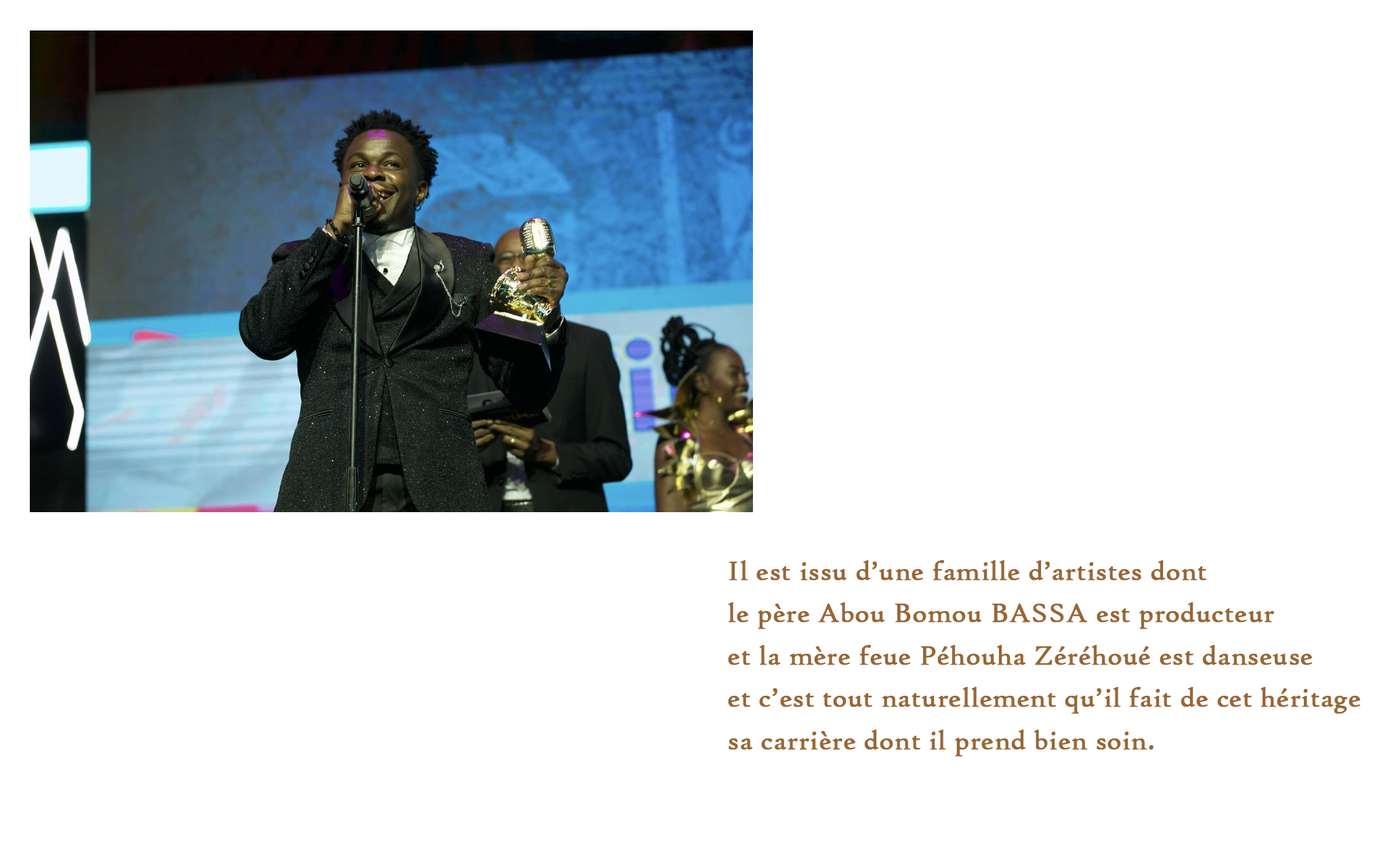
<style>
.page{position:relative;width:1388px;height:859px;background:#ffffff}
.page>*{position:absolute;margin:0}
.t1{font:28.2px/42.4px "HighTowerText-Reg";color:#996633;font-weight:bold}
</style>
<div class="page">
<p class="t1" style="left:728px;top:560px;width:632px;height:197px">Il est issu d’une famille d’artistes dont <br>le père Abou Bomou BASSA est producteur<br>et la mère feue Péhouha Zéréhoué est danseuse<br>et c’est tout naturellement qu’il fait de cet héritage<br>sa carrière dont il prend bien soin.</p>
</div>
